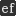
<style>
.page{position:relative;width:16px;height:16px;background:#303030}
.page>*{position:absolute;margin:0}
.t1{font:14px "UsherwoodStd-Medium";letter-spacing:0.05em;color:#e8e8e8}
</style>
<div class="page">
<p class="t1" style="left:2px;top:3px;width:13px;height:10px">ef</p>
</div>
